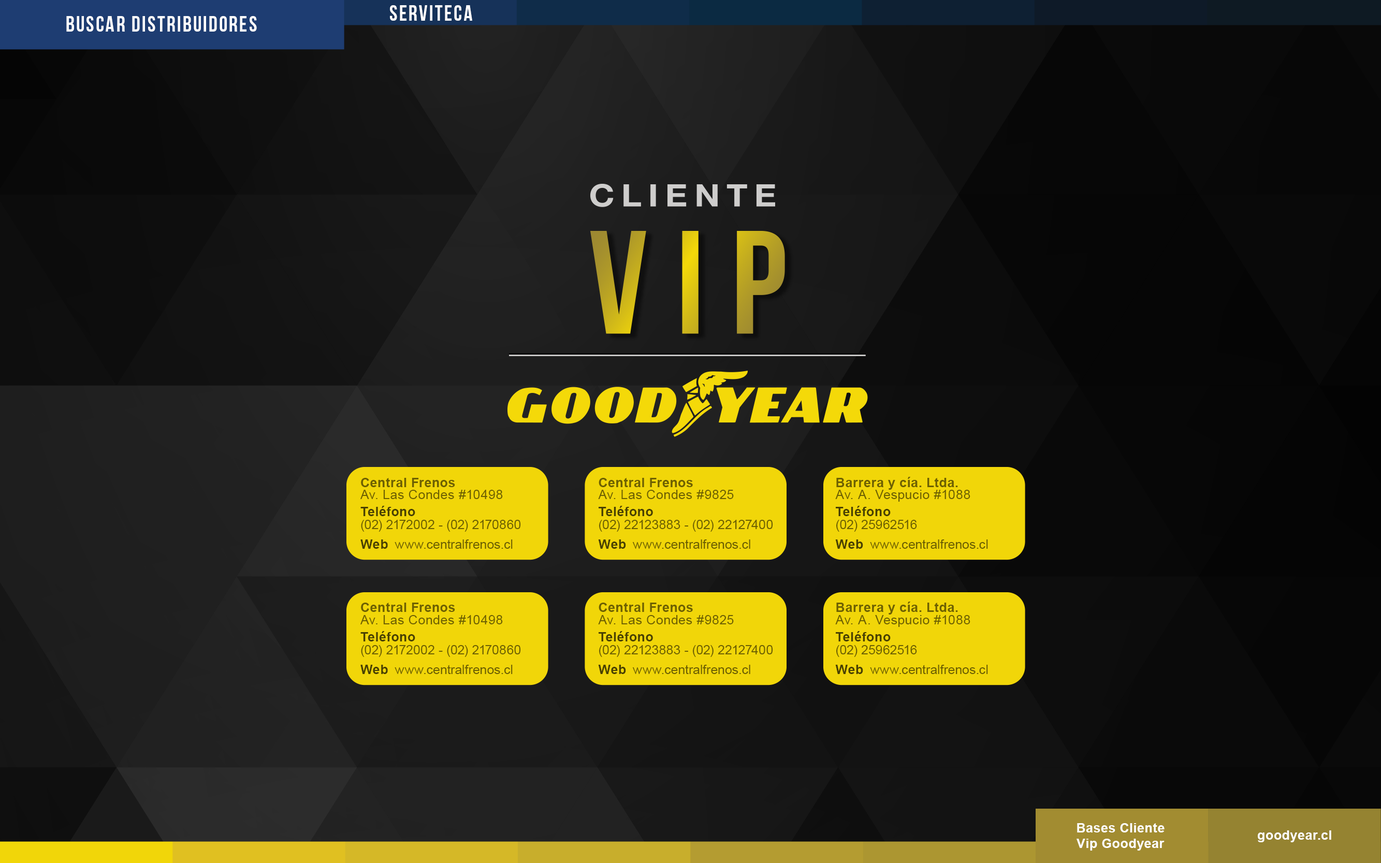
<style>
.page{position:relative;width:1381px;height:863px}
.page>*{position:absolute;margin:0}
.t1{font:21.6px "BebasNeue";letter-spacing:0.075em;color:#ffffff}
.t2{font:12.9px "Arial-BoldMT";letter-spacing:0.025em;color:#6d6002}
.t3{font:12.9px "ArialMT";letter-spacing:0.025em;color:#6d6002}
.t4{font:12.9px "Arial-BoldMT";letter-spacing:0.025em;color:#484003}
.t5{font:12.9px "ArialMT";color:#6d6002}
.t6{font:12.9px "Arial-BoldMT";letter-spacing:0.025em;color:#ffffff}
</style>
<div class="page">
<p class="t1" style="left:390px;top:5px;width:82px;height:16px">SERVITECA</p>
<p class="t1" style="left:66px;top:16px;width:191px;height:16px">BUSCAR DIStribuidores</p>
<p class="t2" style="left:361px;top:478px;width:94px;height:9px">Central Frenos</p>
<p class="t2" style="left:599px;top:478px;width:94px;height:9px">Central Frenos</p>
<p class="t2" style="left:836px;top:477px;width:122px;height:13px">Barrera y cía. Ltda.</p>
<p class="t3" style="left:360px;top:490px;width:143px;height:9px">Av. Las Condes #10498</p>
<p class="t3" style="left:598px;top:490px;width:136px;height:9px">Av. Las Condes #9825</p>
<p class="t3" style="left:835px;top:490px;width:136px;height:12px">Av. A. Vespucio #1088</p>
<p class="t4" style="left:360px;top:506px;width:55px;height:10px">Teléfono</p>
<p class="t4" style="left:599px;top:506px;width:54px;height:10px">Teléfono</p>
<p class="t4" style="left:836px;top:506px;width:55px;height:10px">Teléfono</p>
<p class="t5" style="left:361px;top:520px;width:160px;height:12px">(02) 2172002 - (02) 2170860</p>
<p class="t5" style="left:599px;top:520px;width:174px;height:12px">(02) 22123883 - (02) 22127400</p>
<p class="t5" style="left:836px;top:520px;width:81px;height:12px">(02) 25962516</p>
<p class="t4" style="left:360px;top:540px;width:28px;height:9px">Web</p>
<p class="t5" style="left:395px;top:540px;width:118px;height:9px">www.centralfrenos.cl</p>
<p class="t4" style="left:598px;top:540px;width:28px;height:9px">Web</p>
<p class="t5" style="left:632px;top:540px;width:118px;height:9px">www.centralfrenos.cl</p>
<p class="t4" style="left:835px;top:540px;width:28px;height:9px">Web</p>
<p class="t5" style="left:870px;top:540px;width:118px;height:9px">www.centralfrenos.cl</p>
<p class="t2" style="left:361px;top:603px;width:94px;height:9px">Central Frenos</p>
<p class="t2" style="left:599px;top:603px;width:94px;height:9px">Central Frenos</p>
<p class="t2" style="left:836px;top:602px;width:122px;height:13px">Barrera y cía. Ltda.</p>
<p class="t3" style="left:360px;top:615px;width:143px;height:10px">Av. Las Condes #10498</p>
<p class="t3" style="left:598px;top:615px;width:136px;height:10px">Av. Las Condes #9825</p>
<p class="t3" style="left:835px;top:615px;width:136px;height:12px">Av. A. Vespucio #1088</p>
<p class="t4" style="left:360px;top:631px;width:55px;height:11px">Teléfono</p>
<p class="t4" style="left:599px;top:631px;width:54px;height:11px">Teléfono</p>
<p class="t4" style="left:836px;top:631px;width:55px;height:11px">Teléfono</p>
<p class="t5" style="left:361px;top:645px;width:160px;height:12px">(02) 2172002 - (02) 2170860</p>
<p class="t5" style="left:599px;top:645px;width:174px;height:12px">(02) 22123883 - (02) 22127400</p>
<p class="t5" style="left:836px;top:645px;width:81px;height:12px">(02) 25962516</p>
<p class="t4" style="left:360px;top:665px;width:28px;height:9px">Web</p>
<p class="t5" style="left:395px;top:665px;width:118px;height:9px">www.centralfrenos.cl</p>
<p class="t4" style="left:598px;top:665px;width:28px;height:9px">Web</p>
<p class="t5" style="left:632px;top:665px;width:118px;height:9px">www.centralfrenos.cl</p>
<p class="t4" style="left:835px;top:665px;width:28px;height:9px">Web</p>
<p class="t5" style="left:870px;top:665px;width:118px;height:9px">www.centralfrenos.cl</p>
<p class="t6" style="left:1077px;top:823px;width:88px;height:28px;text-align:center">Bases Cliente<br>Vip Goodyear</p>
<p class="t6" style="left:1258px;top:831px;width:73px;height:12px">goodyear.cl</p>
</div>
